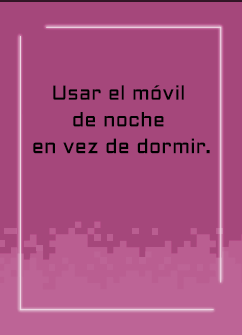
<style>
.page{position:relative;width:242px;height:335px;background:#a5477b}
.page>*{position:absolute;margin:0}
.t1{font:20px/26.7px "Aldrich-Regular";letter-spacing:0.015em;color:#000000}
</style>
<div class="page">
<p class="t1" style="left:33px;top:85px;width:177px;height:69px;text-align:center">Usar el móvil <br>de noche <br>en vez de dormir.</p>
</div>
